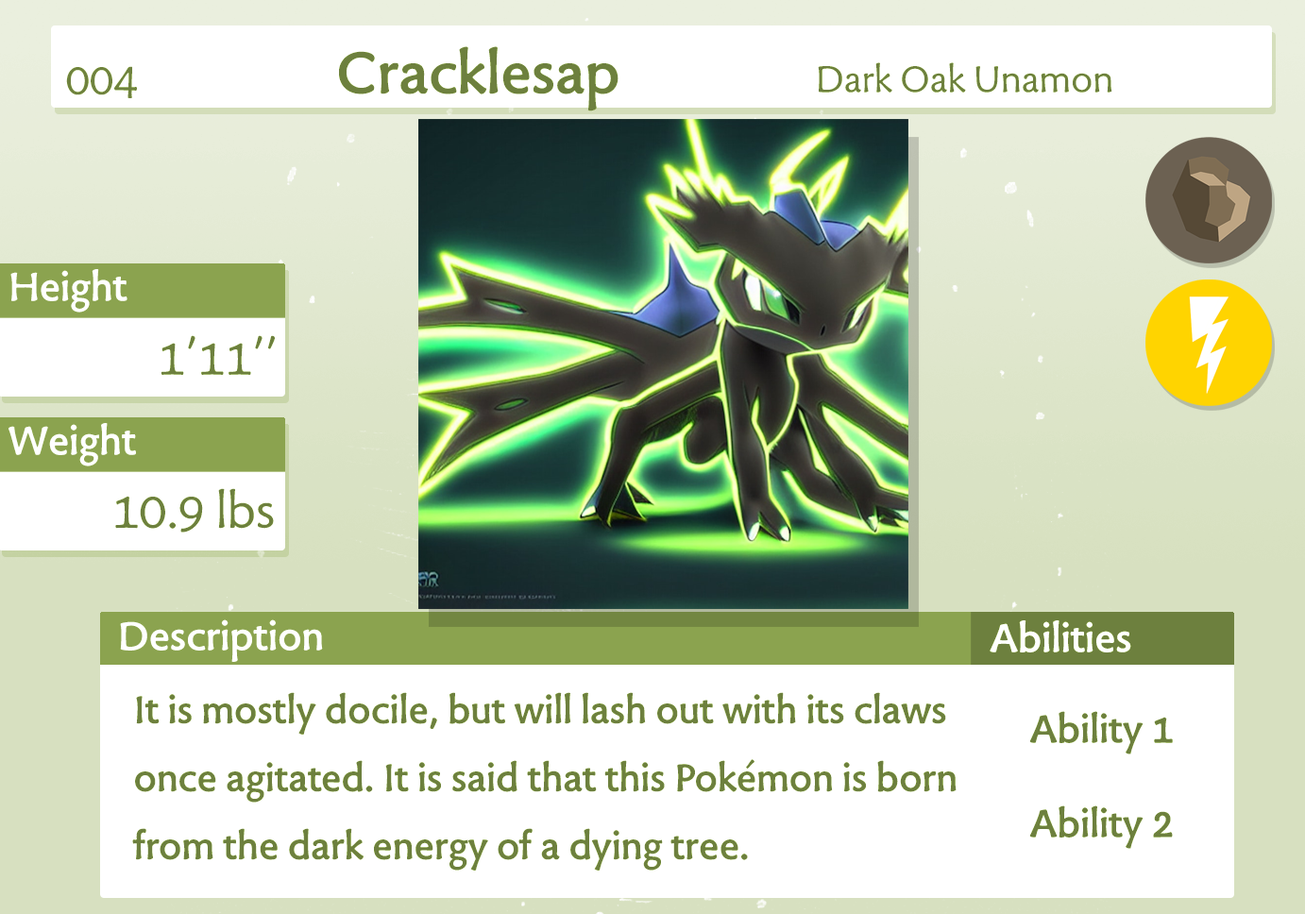
<style>
.page{position:relative;width:1305px;height:914px;background:#ffffff}
.page>*{position:absolute;margin:0}
.t1{font:68px "TuffW01-Bold";color:#6d803e}
.t2{font:42.8px "TuffW01-Normal";color:#6d803e}
.t3{font:49.5px "TuffW01-Normal";color:#6f823f}
.t4{font:46.3px "TuffW01-Bold";color:#ffffff}
.t5{font:56.7px "TuffW01-Normal";color:#6d803e}
.t6{font:44.6px/68px "TuffW01-Bold";color:#6d803e}
.t7{font:45.3px/94.4px "TuffW01-Bold";color:#6d803e}
</style>
<div class="page">
<p class="t1" style="left:339px;top:46px;width:279px;height:65px">Cracklesap</p>
<p class="t2" style="left:818px;top:62px;width:294px;height:31px">Dark Oak Unamon</p>
<p class="t3" style="left:66px;top:66px;width:71px;height:32px">004</p>
<p class="t4" style="left:10px;top:269px;width:117px;height:44px">Height</p>
<p class="t5" style="left:160px;top:335px;width:116px;height:40px">1’11’’</p>
<p class="t4" style="left:8px;top:423px;width:128px;height:43px">Weight</p>
<p class="t5" style="left:115px;top:488px;width:159px;height:44px">10.9 lbs</p>
<p class="t4" style="left:120px;top:619px;width:203px;height:43px">Description</p>
<p class="t4" style="left:989px;top:620px;width:142px;height:32px">Abilities</p>
<p class="t6" style="left:132px;top:692px;width:824px;height:178px">It is mostly docile, but will lash out with its claws<br>once agitated. It is said that this Pokémon is born<br>from the dark energy of a dying tree.</p>
<p class="t7" style="left:1029px;top:711px;width:144px;height:138px;text-align:center">Ability 1<br>Ability 2</p>
</div>
